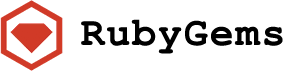
<style>
.page{position:relative;width:283px;height:71px;background:#ffffff}
.page>*{position:absolute;margin:0}
.t1{font:39.7px "CourierNewPS-BoldMT";letter-spacing:0.05em;color:#000000}
</style>
<div class="page">
<p class="t1" style="left:81px;top:19px;width:202px;height:35px">RubyGems</p>
</div>
